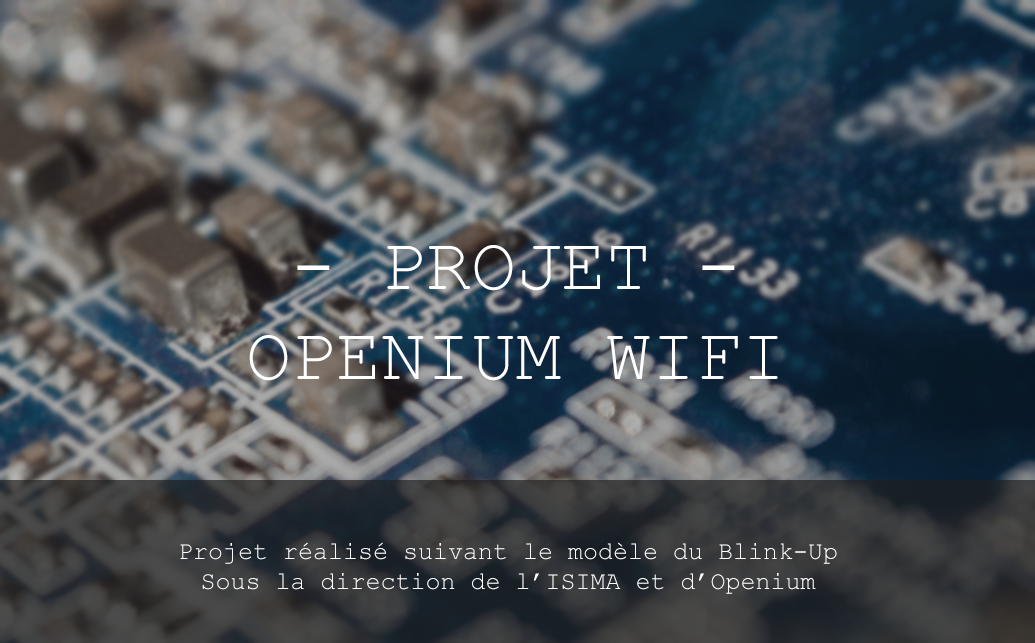
<style>
.page{position:relative;width:1035px;height:643px}
.page>*{position:absolute;margin:0}
.t1{font:75px "CourierNewPSMT";color:#ffffff}
.t2{font:25px "CourierNewPSMT";color:#ffffff}
</style>
<div class="page">
<p class="t1" style="left:249px;top:245px;width:529px;height:136px;text-align:center">- PROJET -<br>OPENIUM WIFI</p>
<p class="t2" style="left:180px;top:542px;width:657px;height:52px;text-align:center">Projet réalisé suivant le modèle du Blink-Up<br>Sous la direction de l’ISIMA et d’Openium</p>
</div>
